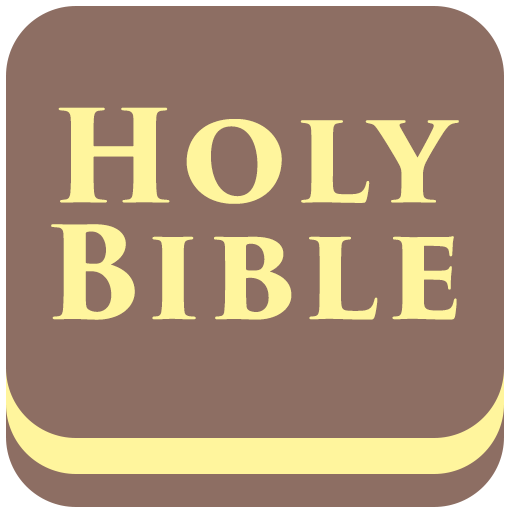
<style>
.page{position:relative;width:512px;height:512px;background:#8d6e63}
.page>*{position:absolute;margin:0}
.t1{font:125px/116.7px "TrajanPro3-Bold";letter-spacing:0.06em;color:#fff59d}
</style>
<div class="page">
<p class="t1" style="left:51px;top:107px;width:408px;height:213px;text-align:center">Holy<br>Bible</p>
</div>
